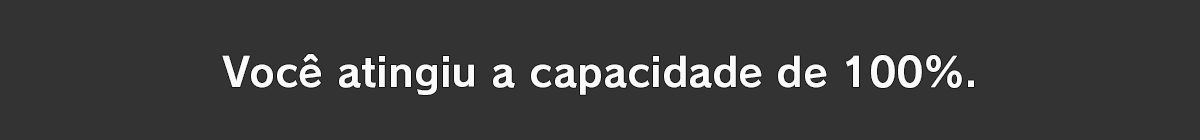
<style>
.page{position:relative;width:1200px;height:140px;background:#333333}
.page>*{position:absolute;margin:0}
.t1{font:40px "RodinPro-B";color:#fbfafb}
</style>
<div class="page">
<p class="t1" style="left:222px;top:54px;width:752px;height:41px">Você atingiu a capacidade de 100%.</p>
</div>
